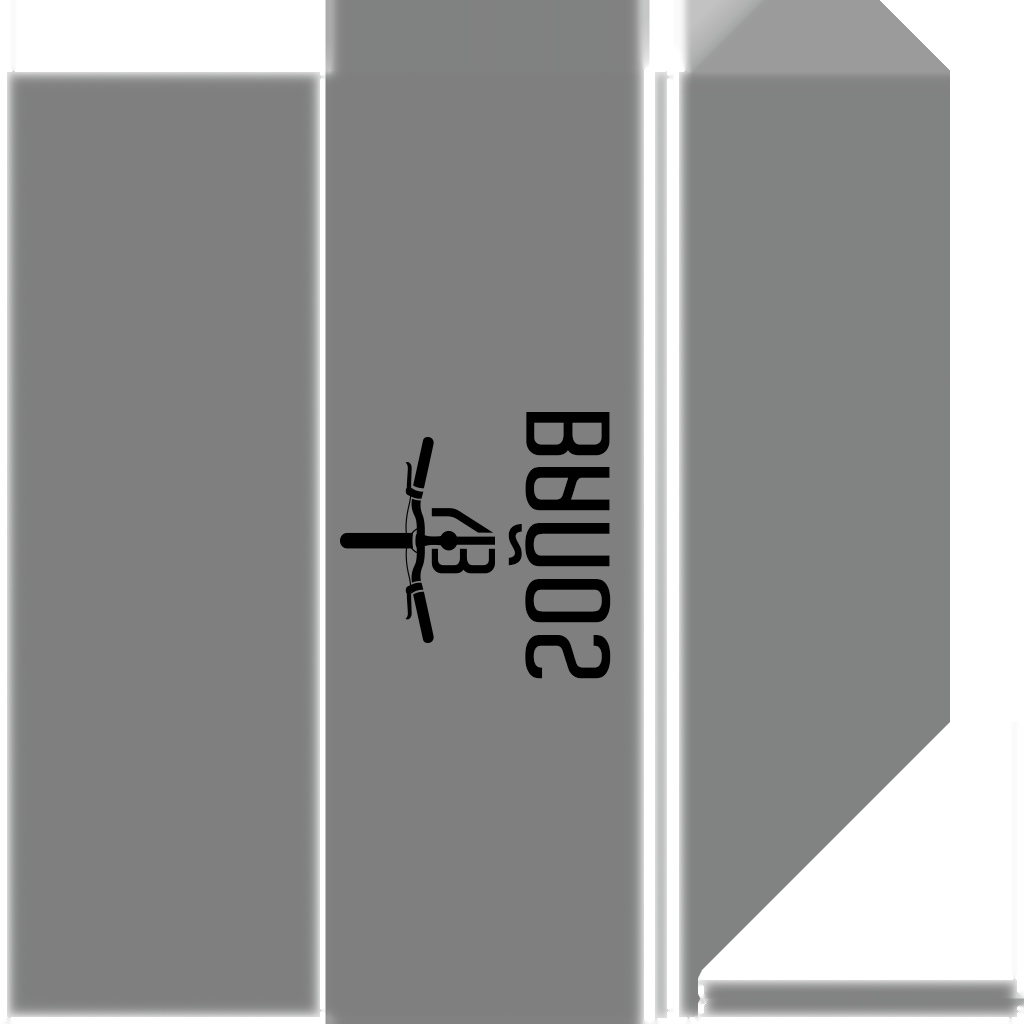
<style>
.page{position:relative;width:1024px;height:1024px;background:#7f7f7f}
.page>*{position:absolute;margin:0}
.t1{font:114.8px "Aldo-SemiBold";color:#000000;scale:1.11 1}
</style>
<div class="page">
<p class="t1" style="left:508px;top:412px;width:103px;height:267px;rotate:90deg">BAÑOS</p>
</div>
